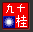
<style>
.page{position:relative;width:33px;height:32px;background:#f20000}
.page>*{position:absolute;margin:0}
.t1{font:10.4px "SimSun";color:#ffffff}
.t2{font:11.7px "SimSun";color:#ffffff}
</style>
<div class="page">
<p class="t1" style="left:6px;top:4px;width:19px;height:9px">九十</p>
<p class="t2" style="left:16px;top:15px;width:11px;height:12px">桂</p>
</div>
